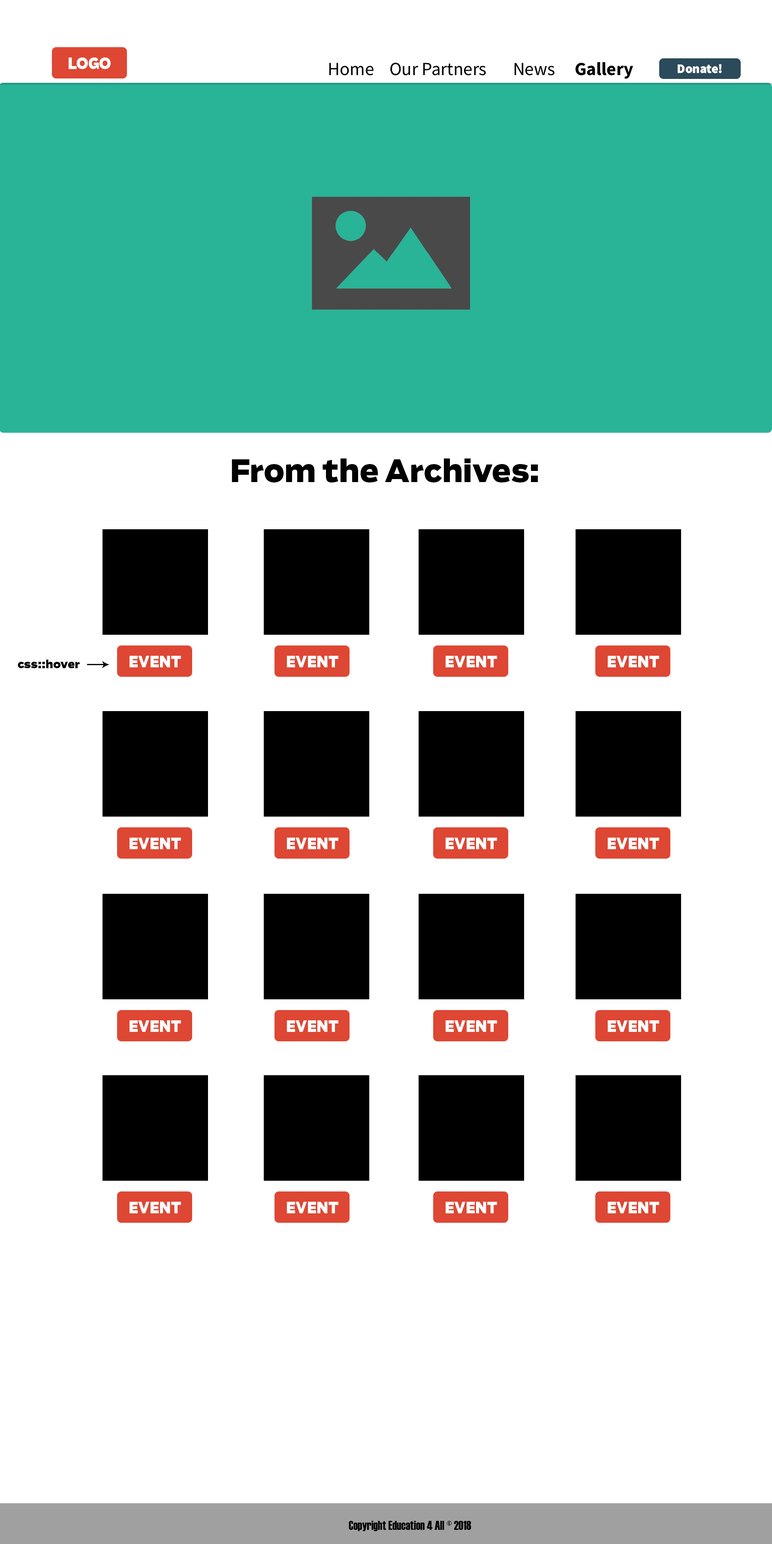
<style>
.page{position:relative;width:772px;height:1544px;background:#ffffff}
.page>*{position:absolute;margin:0}
.t1{font:15.5px "Boomer-Black";color:#ffffff;scale:0.89 1}
.t2{font:18.5px "SourceSansRoman-Regular";color:#000000}
.t3{font:18.5px "SourceSansRoman-Bold";color:#000000}
.t4{font:12.8px "SourceSansRoman-Black";color:#ffffff}
.t5{font:30.5px "Boomer-ExtraBold";color:#000000}
.t6{font:11.2px "Boomer-Black";color:#000000}
.t7{font:12.4px "Haettenschweiler";color:#000000}
</style>
<div class="page">
<p class="t1" style="left:69px;top:57px;width:42px;height:12px">LOGO</p>
<p class="t2" style="left:329px;top:62px;width:304px;height:17px">Home Our Partners  News  <span class="t3">Gallery</span></p>
<p class="t4" style="left:678px;top:64px;width:44px;height:9px">Donate!</p>
<p class="t5" style="left:232px;top:459px;width:306px;height:24px">From the Archives:</p>
<p class="t6" style="left:18px;top:660px;width:62px;height:8px">css::hover</p>
<p class="t1" style="left:130px;top:656px;width:51px;height:11px">EVENT</p>
<p class="t1" style="left:287px;top:656px;width:51px;height:11px">EVENT</p>
<p class="t1" style="left:446px;top:656px;width:51px;height:11px">EVENT</p>
<p class="t1" style="left:608px;top:656px;width:51px;height:11px">EVENT</p>
<p class="t1" style="left:130px;top:838px;width:51px;height:11px">EVENT</p>
<p class="t1" style="left:287px;top:838px;width:51px;height:11px">EVENT</p>
<p class="t1" style="left:446px;top:838px;width:51px;height:11px">EVENT</p>
<p class="t1" style="left:608px;top:838px;width:51px;height:11px">EVENT</p>
<p class="t1" style="left:130px;top:1021px;width:51px;height:11px">EVENT</p>
<p class="t1" style="left:287px;top:1021px;width:51px;height:11px">EVENT</p>
<p class="t1" style="left:446px;top:1021px;width:51px;height:11px">EVENT</p>
<p class="t1" style="left:608px;top:1021px;width:51px;height:11px">EVENT</p>
<p class="t1" style="left:130px;top:1202px;width:51px;height:12px">EVENT</p>
<p class="t1" style="left:287px;top:1202px;width:51px;height:12px">EVENT</p>
<p class="t1" style="left:446px;top:1202px;width:51px;height:12px">EVENT</p>
<p class="t1" style="left:608px;top:1202px;width:51px;height:12px">EVENT</p>
<p class="t7" style="left:349px;top:1521px;width:122px;height:10px">Copyright Education 4 All © 2018</p>
</div>
